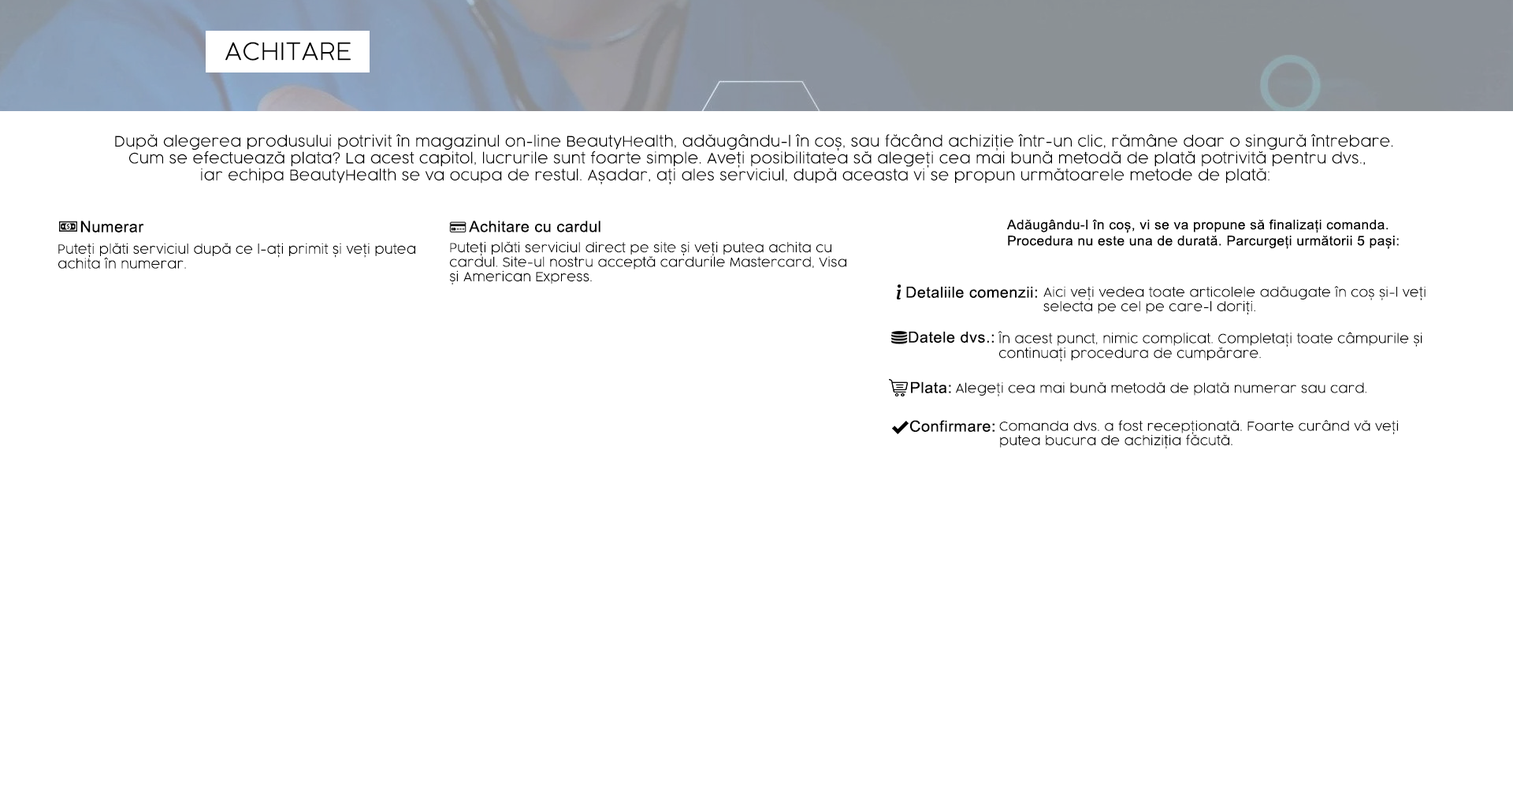
<style>
.page{position:relative;width:1513px;height:788px;background:#ffffff}
.page>*{position:absolute;margin:0}
.t1{font:23.7px "COCOGOOSE-UltraLight";letter-spacing:0.025em;color:#000000}
.t2{font:14.1px "COCOGOOSE-UltraLight";letter-spacing:0.025em;color:#000000}
.t3{font:15.6px "ArialMT";letter-spacing:0.025em;color:#000000}
.t4{font:15.4px "ArialMT";letter-spacing:0.025em;color:#000000}
.t5{font:13.4px "ArialMT";letter-spacing:0.025em;color:#000000}
.t6{font:12.3px "COCOGOOSE-UltraLight";letter-spacing:0.025em;color:#000000}
.t7{font:12.1px "COCOGOOSE-UltraLight";letter-spacing:0.025em;color:#000000}
.t8{font:15.3px "ArialMT";letter-spacing:0.025em;color:#000000}
.t9{font:12px "COCOGOOSE-UltraLight";letter-spacing:0.025em;color:#000000}
.t10{font:12.2px "COCOGOOSE-UltraLight";letter-spacing:0.025em;color:#000000}
</style>
<div class="page">
<p class="t1" style="left:225px;top:42px;width:126px;height:19px">ACHITARE</p>
<p class="t2" style="left:115px;top:134px;width:1278px;height:50px">După alegerea produsului potrivit în magazinul on-line BeautyHealth, adăugându-l în coș, sau făcând achiziție într-un clic, rămâne doar o singură întrebare. <br>   Cum se efectuează plata? La acest capitol, lucrurile sunt foarte simple. Aveți posibilitatea să alegeți cea mai bună metodă de plată potrivită pentru dvs., <br>                  iar echipa BeautyHealth se va ocupa de restul. Așadar, ați ales serviciul, după aceasta vi se propun următoarele metode de plată:</p>
<p class="t3" style="left:80px;top:221px;width:64px;height:11px">Numerar</p>
<p class="t4" style="left:469px;top:221px;width:132px;height:11px">Achitare cu cardul</p>
<p class="t5" style="left:1006px;top:219px;width:393px;height:30px">Adăugându-l în coș, vi se va propune să finalizați comanda. <br>Procedura nu este una de durată. Parcurgeți următorii 5 pași:</p>
<p class="t6" style="left:58px;top:243px;width:357px;height:26px">Puteți plăti serviciul după ce l-ați primit și veți putea<br>achita în numerar.</p>
<p class="t7" style="left:449px;top:241px;width:397px;height:44px">Puteți plăti serviciul direct pe site și veți putea achita cu<br>cardul. Site-ul nostru acceptă cardurile Mastercard, Visa<br>și American Express.</p>
<p class="t8" style="left:906px;top:286px;width:131px;height:12px">Detaliile comenzii:</p>
<p class="t9" style="left:1043px;top:286px;width:383px;height:29px">Aici veți vedea toate articolele adăugate în coș și-l veți <br>selecta pe cel pe care-l doriți.</p>
<p class="t8" style="left:909px;top:331px;width:85px;height:12px">Datele dvs.:</p>
<p class="t6" style="left:998px;top:331px;width:424px;height:31px">În acest punct, nimic complicat. Completați toate câmpurile și <br>continuați procedura de cumpărare.</p>
<p class="t8" style="left:911px;top:381px;width:40px;height:12px">Plata:</p>
<p class="t10" style="left:956px;top:382px;width:411px;height:14px">Alegeți cea mai bună metodă de plată numerar sau card.</p>
<p class="t8" style="left:909px;top:420px;width:86px;height:12px">Confirmare:</p>
<p class="t9" style="left:999px;top:420px;width:399px;height:29px">Comanda dvs. a fost recepționată. Foarte curând vă veți <br>putea bucura de achiziția făcută.</p>
</div>
